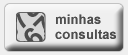
<style>
.page{position:relative;width:128px;height:55px;background:#efefef}
.page>*{position:absolute;margin:0}
.t1{font:13.3px "Arial-BoldMT";color:#4e4e4e}
</style>
<div class="page">
<p class="t1" style="left:55px;top:14px;width:61px;height:25px">minhas<br>consultas</p>
</div>
